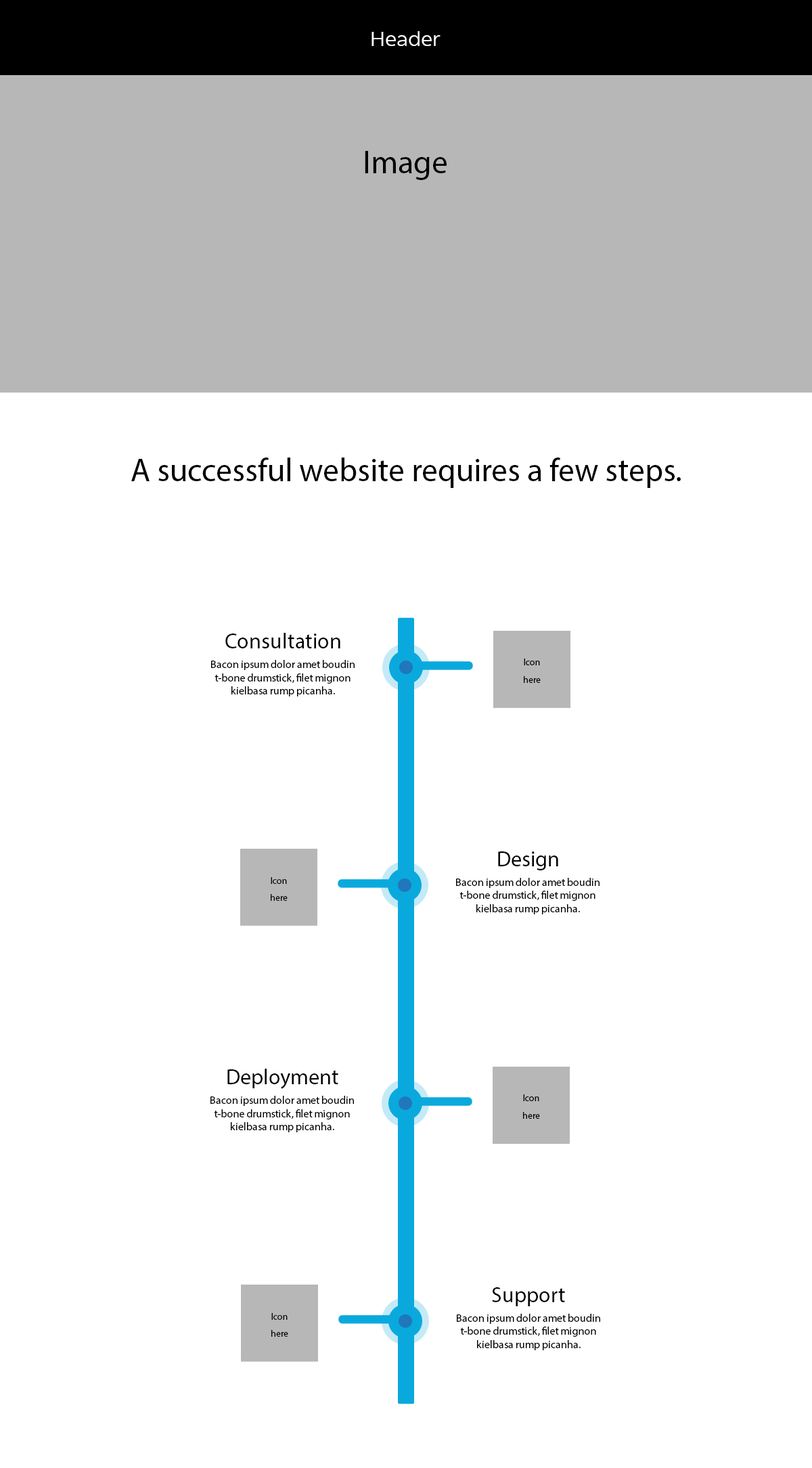
<style>
.page{position:relative;width:812px;height:1468px;background:#ffffff}
.page>*{position:absolute;margin:0}
.t1{font:20.3px "MSLondoneText-Semibold";color:#ffffff}
.t2{font:32.5px "MyriadPro-Regular";color:#000000}
.t3{font:21.7px "MyriadPro-Regular";color:#000000}
.t4{font:10.8px "MyriadPro-Regular";color:#000000}
.t5{font:9.5px "MyriadPro-Regular";color:#000000}
.t6{font:21.6px "MyriadPro-Regular";color:#000000}
.t7{font:9.4px "MyriadPro-Regular";color:#000000}
</style>
<div class="page">
<p class="t1" style="left:372px;top:31px;width:69px;height:15px">Header</p>
<p class="t2" style="left:365px;top:151px;width:82px;height:29px">Image</p>
<p class="t2" style="left:131px;top:458px;width:550px;height:30px">A successful website requires a few steps.</p>
<p class="t3" style="left:225px;top:633px;width:115px;height:15px">Consultation</p>
<p class="t4" style="left:211px;top:660px;width:144px;height:36px;text-align:center">Bacon ipsum dolor amet boudin t-bone drumstick, filet mignon kielbasa rump picanha.</p>
<p class="t5" style="left:524px;top:659px;width:17px;height:24px;text-align:center">Icon<br>here</p>
<p class="t6" style="left:498px;top:851px;width:60px;height:19px">Design</p>
<p class="t7" style="left:271px;top:877px;width:17px;height:24px;text-align:center">Icon<br>here</p>
<p class="t4" style="left:456px;top:878px;width:144px;height:36px;text-align:center">Bacon ipsum dolor amet boudin t-bone drumstick, filet mignon kielbasa rump picanha.</p>
<p class="t3" style="left:227px;top:1069px;width:111px;height:20px">Deployment</p>
<p class="t4" style="left:211px;top:1096px;width:143px;height:36px;text-align:center">Bacon ipsum dolor amet boudin t-bone drumstick, filet mignon kielbasa rump picanha.</p>
<p class="t5" style="left:523px;top:1094px;width:17px;height:25px;text-align:center">Icon<br>here</p>
<p class="t6" style="left:492px;top:1287px;width:73px;height:19px">Support</p>
<p class="t7" style="left:271px;top:1313px;width:17px;height:24px;text-align:center">Icon<br>here</p>
<p class="t4" style="left:457px;top:1314px;width:143px;height:36px;text-align:center">Bacon ipsum dolor amet boudin t-bone drumstick, filet mignon kielbasa rump picanha.</p>
</div>
